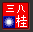
<style>
.page{position:relative;width:33px;height:32px;background:#f20000}
.page>*{position:absolute;margin:0}
.t1{font:10.4px "SimSun";color:#ffffff}
.t2{font:11.7px "SimSun";color:#ffffff}
</style>
<div class="page">
<p class="t1" style="left:6px;top:5px;width:19px;height:8px">三八</p>
<p class="t2" style="left:16px;top:15px;width:11px;height:12px">桂</p>
</div>
